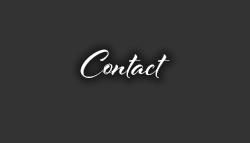
<style>
.page{position:relative;width:250px;height:143px;background:#333333}
.page>*{position:absolute;margin:0}
.t1{font:37.5px "AlFresco-Bold";color:#fffefe}
</style>
<div class="page">
<p class="t1" style="left:80px;top:49px;width:90px;height:29px">Contact</p>
</div>
